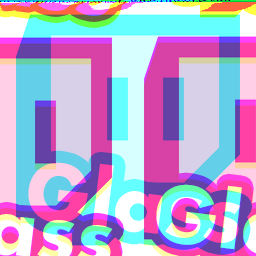
<style>
.page{position:relative;width:256px;height:256px}
.page>*{position:absolute;margin:0}
.t1{font:85px "Aharoni-Bold"}
</style>
<div class="page">
<p class="t1" style="left:28px;top:160px;width:213px;height:81px;rotate:7deg">Glass</p>
</div>
